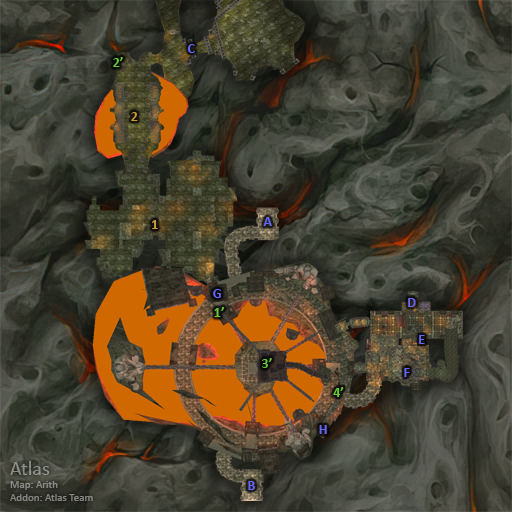
<style>
.page{position:relative;width:512px;height:512px}
.page>*{position:absolute;margin:0}
.t1{font:14px "Calibri-Bold";color:#6666ff}
.t2{font:14px "Calibri-Bold";color:#66cc33}
.t3{font:14px "Calibri-Bold";color:#cc9933}
.t4{font:11px "Calibri";color:#898a85}
.t5{font:20px "Calibri";color:#898a85}
</style>
<div class="page">
<p class="t1" style="left:188px;top:44px;width:7px;height:9px">C</p>
<p class="t2" style="left:113px;top:57px;width:10px;height:10px">2’</p>
<p class="t3" style="left:131px;top:112px;width:7px;height:9px">2</p>
<p class="t3" style="left:152px;top:220px;width:6px;height:9px">1</p>
<p class="t1" style="left:263px;top:217px;width:9px;height:9px">A</p>
<p class="t1" style="left:213px;top:289px;width:8px;height:9px">G</p>
<p class="t1" style="left:408px;top:298px;width:8px;height:9px">D</p>
<p class="t2" style="left:214px;top:307px;width:10px;height:10px">1’</p>
<p class="t1" style="left:419px;top:335px;width:6px;height:9px">E</p>
<p class="t2" style="left:262px;top:358px;width:10px;height:10px">3’</p>
<p class="t1" style="left:404px;top:368px;width:6px;height:9px">F</p>
<p class="t2" style="left:333px;top:387px;width:11px;height:10px">4’</p>
<p class="t1" style="left:319px;top:425px;width:8px;height:9px">H</p>
<p class="t4" style="left:10px;top:461px;width:83px;height:40px"><span class="t5">Atlas<br></span>Map: Arith<br>Addon: Atlas Team</p>
<p class="t1" style="left:248px;top:481px;width:7px;height:9px">B</p>
</div>
